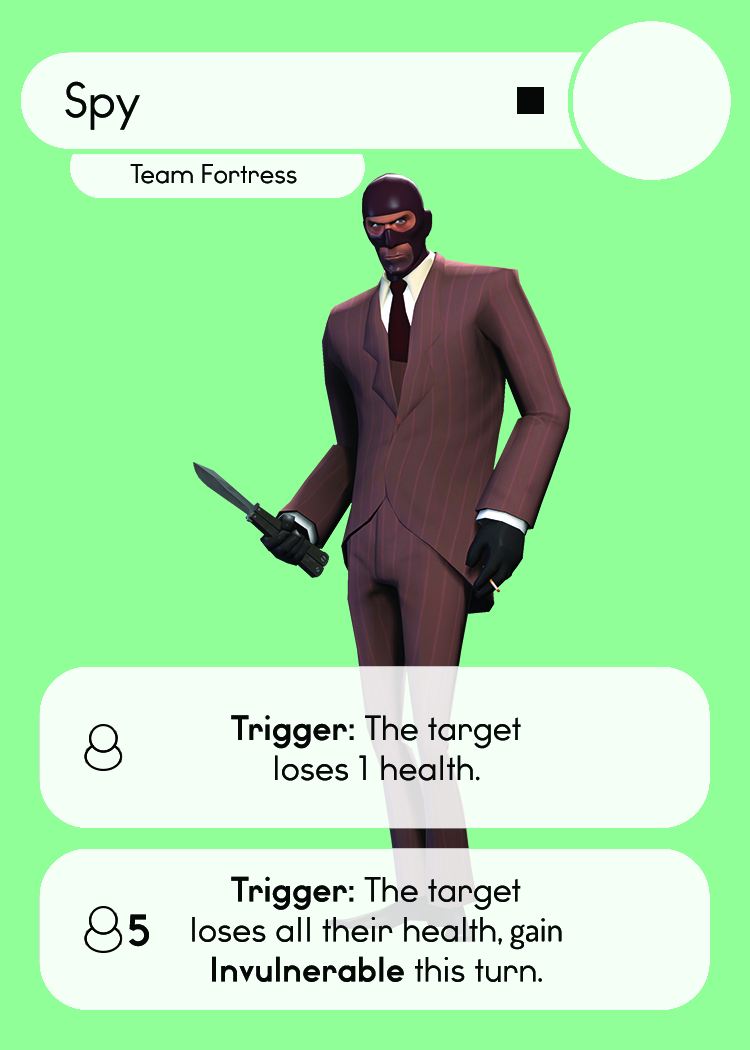
<style>
.page{position:relative;width:750px;height:1050px;background:#91ff97}
.page>*{position:absolute;margin:0}
.t1{font:46.7px "WatchwordRegularDemo";color:#060808}
.t2{font:25.5px "WatchwordRegularDemo";color:#060808}
.t3{font:33.3px "WatchwordRegularDemo";color:#060808}
.t4{font:33.3px "WatchwordBoldDemo";color:#060808}
.t5{font:33.3px "Dosis-Medium";color:#060808}
.t6{font:41.7px "WatchwordBoldDemo";color:#060808}
</style>
<div class="page">
<p class="t1" style="left:65px;top:81px;width:75px;height:49px">Spy</p>
<p class="t2" style="left:130px;top:164px;width:167px;height:20px">Team Fortress</p>
<p class="t3" style="left:231px;top:715px;width:290px;height:66px;text-align:center"><span class="t4">Trigger: </span>The target<br>loses 1 health<span class="t5">.</span></p>
<p class="t3" style="left:192px;top:876px;width:370px;height:106px;text-align:center"><span class="t4">Trigger: </span>The target<br>loses all their health<span class="t5">, gain<br></span><span class="t4">Invulnerable </span>this turn<span class="t5">.</span></p>
<p class="t6" style="left:129px;top:914px;width:20px;height:33px">5</p>
</div>
